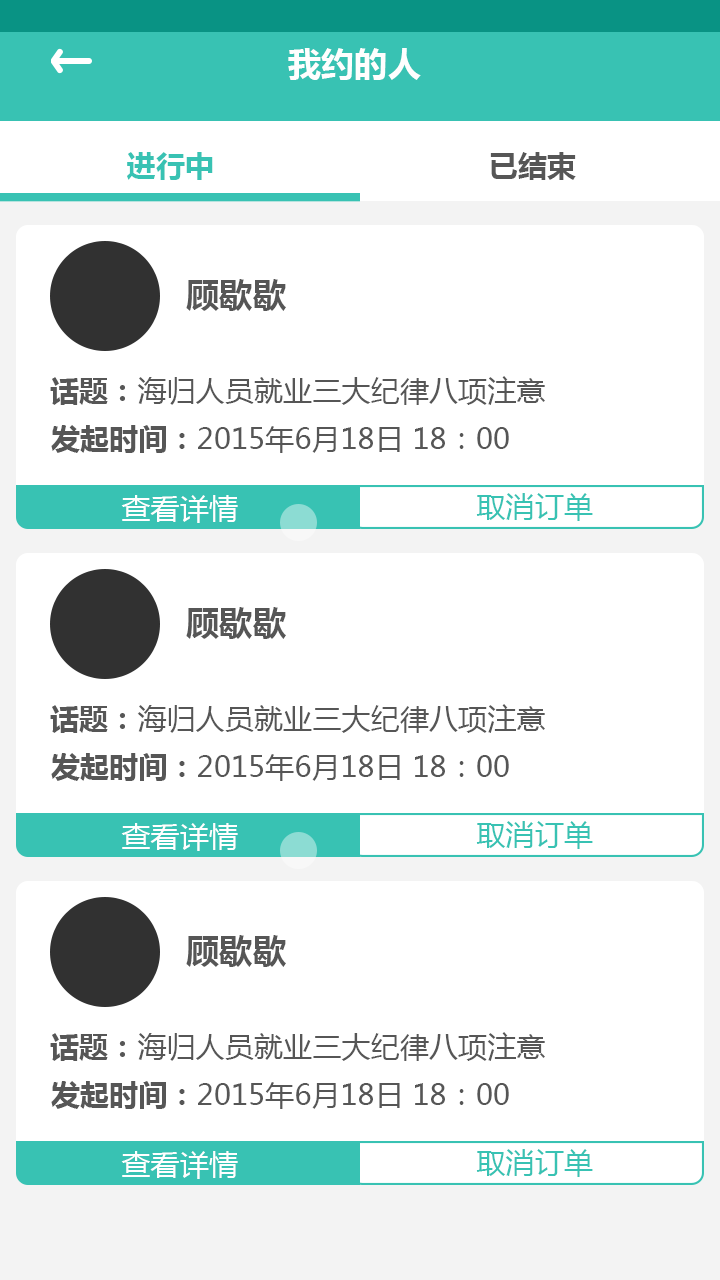
<style>
.page{position:relative;width:720px;height:1280px;background:#ffffff}
.page>*{position:absolute;margin:0}
.t1{font:33.3px "MicrosoftYaHei-Bold";color:#fefefe}
.t2{font:29.2px "MicrosoftYaHei-Bold";color:#38c2b3}
.t3{font:29.2px "MicrosoftYaHei-Bold";color:#565656}
.t4{font:33.3px "MicrosoftYaHei-Bold";color:#565656}
.t5{font:29.2px "MicrosoftYaHei";color:#565656}
.t6{font:29.2px "MicrosoftYaHei";color:#ffffff}
.t7{font:29.2px "MicrosoftYaHei";color:#38c2b3}
</style>
<div class="page">
<p class="t1" style="left:288px;top:48px;width:133px;height:32px">我约的人</p>
<p class="t2" style="left:127px;top:152px;width:86px;height:28px">进行中</p>
<p class="t3" style="left:490px;top:152px;width:86px;height:28px">已结束</p>
<p class="t4" style="left:186px;top:279px;width:100px;height:32px">顾歇歇</p>
<p class="t5" style="left:50px;top:376px;width:495px;height:29px"><span class="t3">话题：</span>海归人员就业三大纪律八项注意</p>
<p class="t5" style="left:51px;top:425px;width:458px;height:28px"><span class="t3">发起时间：</span>2015年6月18日 18：00</p>
<p class="t6" style="left:121px;top:495px;width:117px;height:28px">查看详情</p>
<p class="t7" style="left:476px;top:493px;width:117px;height:28px">取消订单</p>
<p class="t4" style="left:186px;top:607px;width:100px;height:32px">顾歇歇</p>
<p class="t5" style="left:50px;top:704px;width:495px;height:29px"><span class="t3">话题：</span>海归人员就业三大纪律八项注意</p>
<p class="t5" style="left:51px;top:753px;width:458px;height:28px"><span class="t3">发起时间：</span>2015年6月18日 18：00</p>
<p class="t7" style="left:476px;top:821px;width:117px;height:28px">取消订单</p>
<p class="t6" style="left:121px;top:823px;width:117px;height:28px">查看详情</p>
<p class="t4" style="left:186px;top:935px;width:100px;height:32px">顾歇歇</p>
<p class="t5" style="left:50px;top:1032px;width:495px;height:29px"><span class="t3">话题：</span>海归人员就业三大纪律八项注意</p>
<p class="t5" style="left:51px;top:1081px;width:458px;height:28px"><span class="t3">发起时间：</span>2015年6月18日 18：00</p>
<p class="t6" style="left:121px;top:1151px;width:117px;height:28px">查看详情</p>
<p class="t7" style="left:476px;top:1149px;width:117px;height:28px">取消订单</p>
</div>
